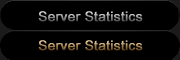
<style>
.page{position:relative;width:180px;height:60px;background:#000000}
.page>*{position:absolute;margin:0}
.t1{font:13.1px "ArialNarrow";font-weight:bold;scale:1.25 1}
</style>
<div class="page">
<p class="t1" style="left:38px;top:11px;width:105px;height:11px">Server Statistics</p>
<p class="t1" style="left:38px;top:40px;width:105px;height:11px">Server Statistics</p>
</div>
